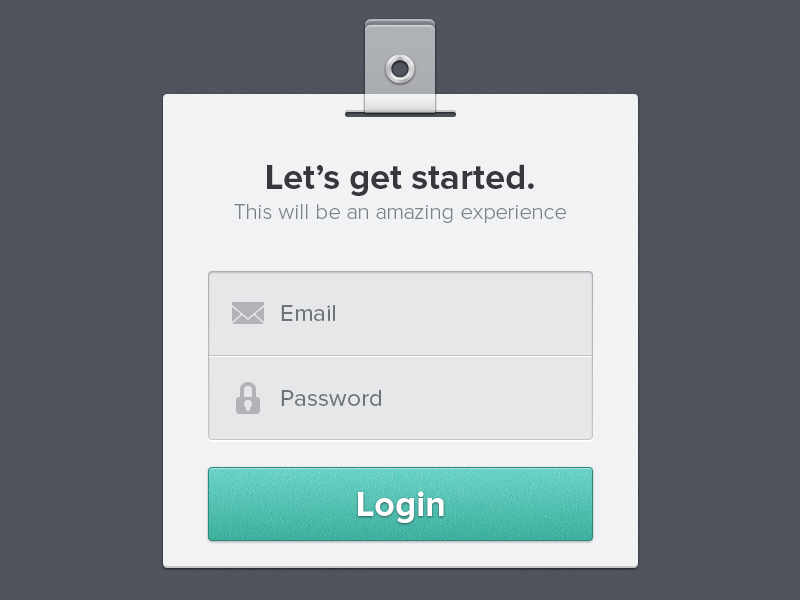
<style>
.page{position:relative;width:800px;height:600px;background:#f1f2f4}
.page>*{position:absolute;margin:0}
.t1{font:22px/30px "ProximaNova-Light";color:#7c818b}
.t2{font:36px/30px "ProximaNova-Bold";color:#36383c}
.t3{font:24px "ProximaNova-Regular";color:#6f7278}
.t4{font:36px "ProximaNova-Bold";color:#ffffff}
</style>
<div class="page">
<p class="t1" style="left:234px;top:164px;width:332px;height:59px;text-align:center"><span class="t2">Let’s get started.<br></span>This will be an amazing experience</p>
<p class="t3" style="left:281px;top:305px;width:54px;height:16px">Email</p>
<p class="t3" style="left:281px;top:389px;width:100px;height:17px">Password</p>
<p class="t4" style="left:358px;top:491px;width:86px;height:32px">Login</p>
</div>
